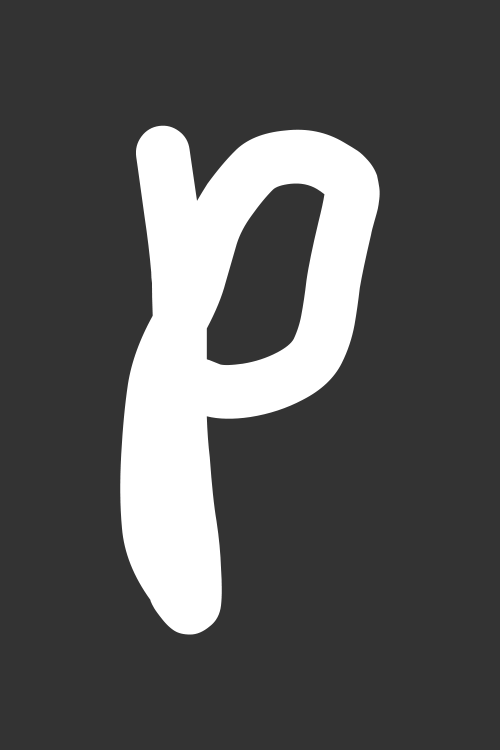
<style>
.page{position:relative;width:500px;height:750px;background:#333333}
.page>*{position:absolute;margin:0}
.t1{font:750px "kindergarten";color:#ffffff}
</style>
<div class="page">
<p class="t1" style="left:120px;top:125px;width:260px;height:510px">p</p>
</div>
